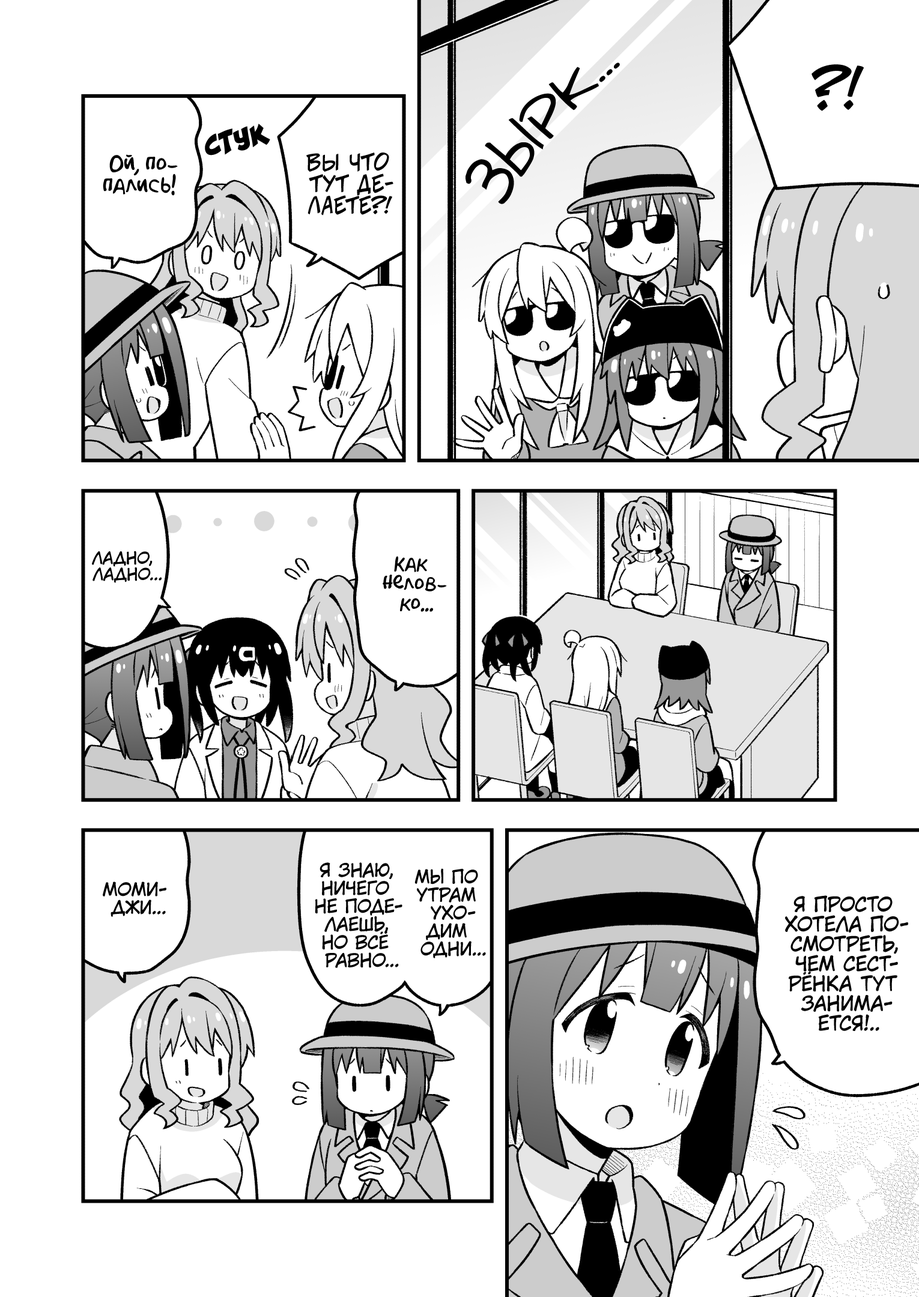
<style>
.page{position:relative;width:919px;height:1297px;background:#ffffff}
.page>*{position:absolute;margin:0}
.t1{font:54.1px "v_Augie";color:#000000;text-transform:uppercase}
.t2{font:54.1px "v_CCJeffCampbell";color:#000000;text-transform:uppercase}
.t3{font:27px "v_CCRatatatat";color:#000000}
.t4{font:21.6px "AkbarPlain";color:#000000}
.t5{font:21.6px "v_CCJeffCampbell";color:#000000;text-transform:uppercase}
.t6{font:16.2px "KuraiVoice2";color:#000000;text-transform:uppercase}
.t7{font:19.8px "AkbarPlain";color:#000000}
.t8{font:18px "KuraiVoice2";color:#000000;text-transform:uppercase}
.t9{font:19.8px "KuraiVoice2";color:#000000;text-transform:uppercase}
</style>
<div class="page">
<p class="t1" style="left:466px;top:62px;width:154px;height:142px;rotate:-48deg">зырк...</p>
<p class="t2" style="left:812px;top:64px;width:52px;height:47px">?!</p>
<p class="t3" style="left:205px;top:124px;width:65px;height:32px;rotate:-11deg">стук</p>
<p class="t4" style="left:103px;top:154px;width:75px;height:42px;text-align:center">Ой, по-<br>пались!</p>
<p class="t5" style="left:306px;top:153px;width:87px;height:63px;text-align:center">Вы что<br>тут де-<br>лаете?!</p>
<p class="t6" style="left:92px;top:551px;width:70px;height:32px;text-align:center">Ладно,<br>ладно...</p>
<p class="t7" style="left:383px;top:556px;width:64px;height:56px;text-align:center">Как<br>нелов-<br>ко...</p>
<p class="t8" style="left:315px;top:863px;width:87px;height:105px;text-align:center">Я знаю,<br>ничего<br>не поде-<br>лаешь,<br>но всё<br>равно...</p>
<p class="t8" style="left:414px;top:869px;width:72px;height:90px;text-align:center">Мы по<br>утрам<br>ухо-<br>дим<br>одни...</p>
<p class="t8" style="left:103px;top:882px;width:63px;height:35px;text-align:center">Моми-<br>джи...</p>
<p class="t9" style="left:785px;top:896px;width:123px;height:135px;text-align:center">Я просто<br>хотела по-<br>смотреть,<br>чем сест-<br>рёнка тут<br>занима-<br>ется!..</p>
</div>
